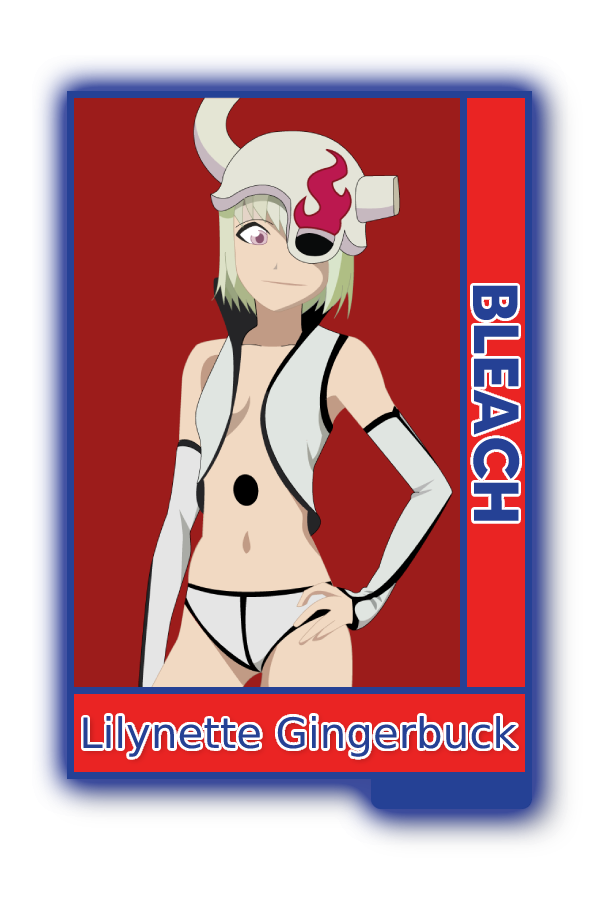
<style>
.page{position:relative;width:600px;height:900px;background:#9c1c1b}
.page>*{position:absolute;margin:0}
.t1{font:63.6px "MADETOMMY-Bold";color:#254195}
.t2{font:42px "CoolveticaRg-Regular";color:#254195}
</style>
<div class="page">
<p class="t1" style="left:473px;top:285px;width:47px;height:236px;rotate:90deg">BLEACH</p>
<p class="t2" style="left:83px;top:716px;width:434px;height:41px">Lilynette Gingerbuck</p>
</div>
